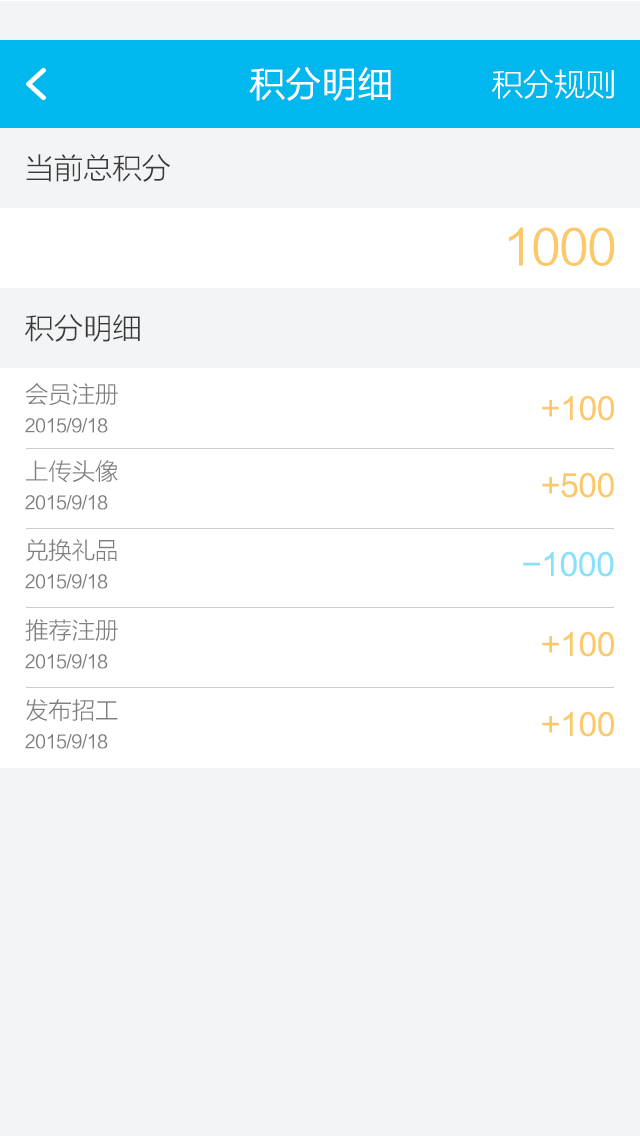
<style>
.page{position:relative;width:640px;height:1136px;background:#f3f4f5}
.page>*{position:absolute;margin:0}
.t1{font:36px "FZLTXHKM";letter-spacing:-0.025em;color:#ffffff;font-weight:bold}
.t2{font:32px "FZLTXHKM";letter-spacing:-0.025em;color:#ffffff}
.t3{font:30px "FZLTXHKM";letter-spacing:-0.025em;color:#3a3939}
.t4{font:48px "FZLTXHKM";letter-spacing:-0.025em;color:#fbc96a}
.t5{font:18px/24px "FZLTXHKM";letter-spacing:-0.025em;color:#7e7e7e}
.t6{font:24px/24px "FZLTXHKM";letter-spacing:-0.025em;color:#7e7e7e}
.t7{font:30px "FZLTXHKM";letter-spacing:-0.025em;color:#fbc96a;font-weight:bold}
.t8{font:30px "FZLTXHKM";letter-spacing:-0.025em;color:#86e1fc;font-weight:bold}
</style>
<div class="page">
<p class="t1" style="left:249px;top:67px;width:142px;height:34px">积分明细</p>
<p class="t2" style="left:491px;top:69px;width:123px;height:30px">积分规则</p>
<p class="t3" style="left:26px;top:154px;width:144px;height:28px">当前总积分</p>
<p class="t4" style="left:509px;top:227px;width:106px;height:39px">1000</p>
<p class="t3" style="left:24px;top:314px;width:116px;height:28px">积分明细</p>
<p class="t5" style="left:25px;top:383px;width:93px;height:50px"><span class="t6">会员注册<br></span>2015/9/18</p>
<p class="t7" style="left:542px;top:395px;width:72px;height:26px">+100</p>
<p class="t5" style="left:25px;top:459px;width:93px;height:51px"><span class="t6">上传头像<br></span>2015/9/18</p>
<p class="t7" style="left:542px;top:472px;width:72px;height:26px">+500</p>
<p class="t5" style="left:25px;top:539px;width:92px;height:50px"><span class="t6">兑换礼品<br></span>2015/9/18</p>
<p class="t8" style="left:523px;top:551px;width:91px;height:26px">-1000</p>
<p class="t5" style="left:25px;top:619px;width:93px;height:50px"><span class="t6">推荐注册<br></span>2015/9/18</p>
<p class="t7" style="left:542px;top:631px;width:72px;height:26px">+100</p>
<p class="t5" style="left:25px;top:699px;width:93px;height:50px"><span class="t6">发布招工<br></span>2015/9/18</p>
<p class="t7" style="left:542px;top:711px;width:72px;height:26px">+100</p>
</div>
